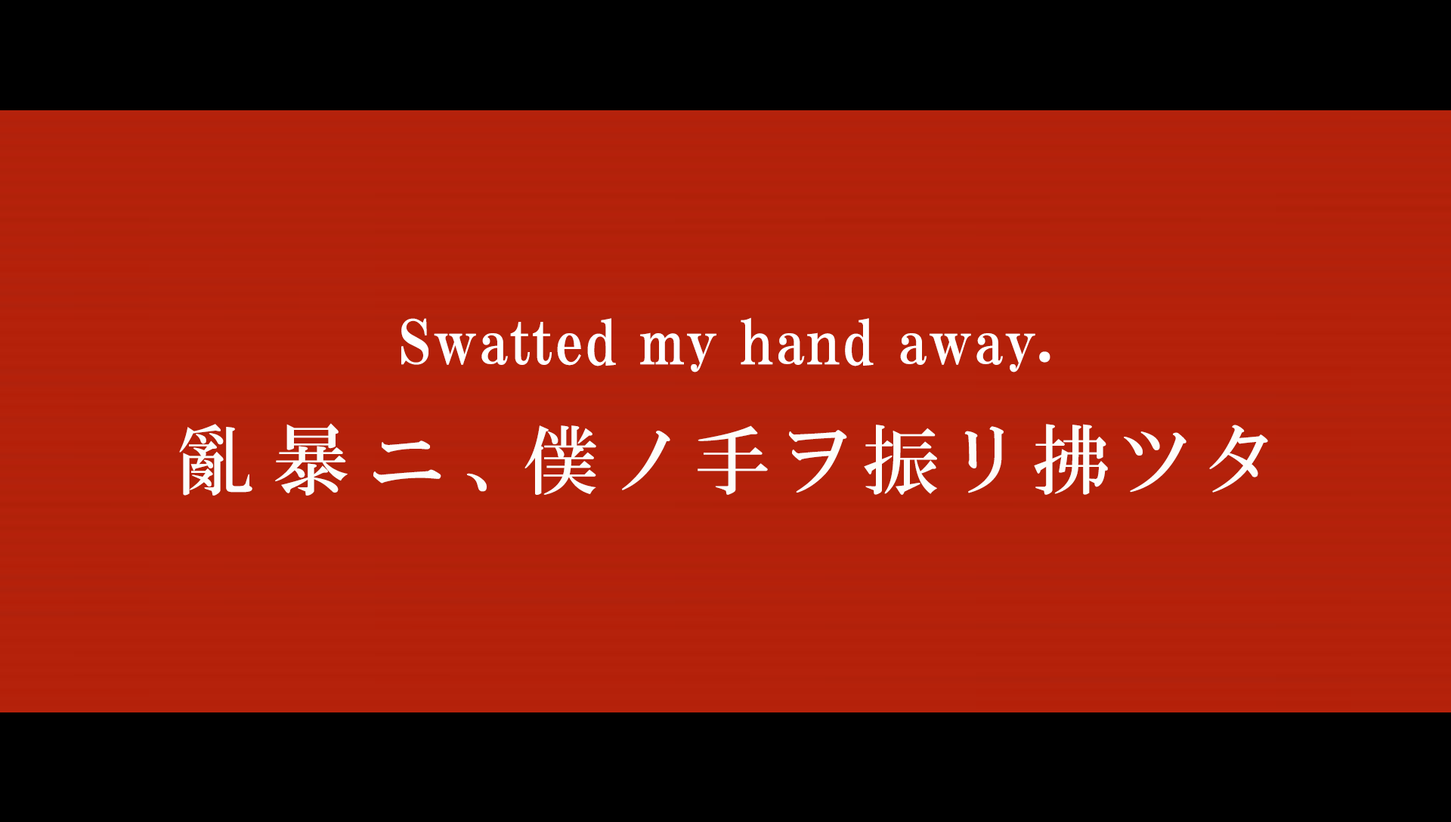
<style>
.page{position:relative;width:1451px;height:822px;background:#000000}
.page>*{position:absolute;margin:0}
.t1{font:60.4px "HGPMinchoE";letter-spacing:0.025em;color:#ffffff}
.t2{font:76.3px "HGMinchoB";letter-spacing:0.11em;color:#fdfdfa}
.t3{font:76.3px "HGMinchoB";letter-spacing:0.25em;color:#fdfdfa}
.t4{font:76.3px "HGMinchoB";letter-spacing:-0.21em;color:#fdfdfa}
</style>
<div class="page">
<p class="t1" style="left:401px;top:317px;width:649px;height:55px">Swatted my hand away.</p>
<p class="t2" style="left:179px;top:423px;width:1089px;height:73px"><span class="t3">亂暴ニ</span><span class="t4">、</span>僕ノ手ヲ振リ拂ツタ</p>
</div>
